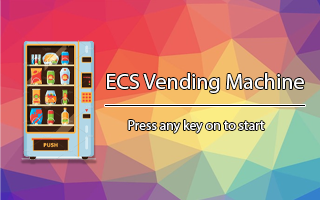
<style>
.page{position:relative;width:320px;height:200px}
.page>*{position:absolute;margin:0}
.t1{font:22px "MyriadPro-Regular";color:#ffffff}
.t2{font:13.7px "MyriadPro-Regular";color:#ffffff}
</style>
<div class="page">
<p class="t1" style="left:107px;top:73px;width:197px;height:20px">ECS Vending Machine</p>
<p class="t2" style="left:128px;top:120px;width:137px;height:13px">Press any key on to start</p>
</div>
